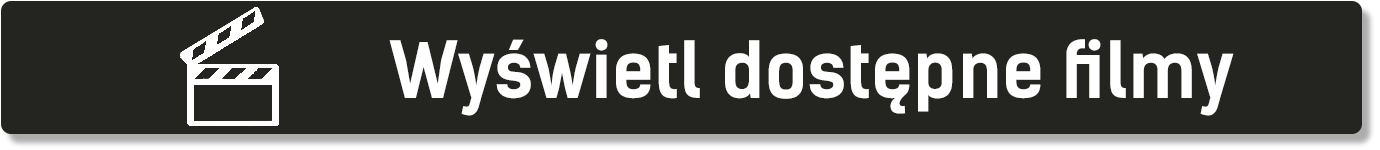
<style>
.page{position:relative;width:1380px;height:150px;background:#242420}
.page>*{position:absolute;margin:0}
.t1{font:75px "KelsonSansBG-Bold";color:#ffffff}
</style>
<div class="page">
<p class="t1" style="left:389px;top:39px;width:845px;height:77px">Wyświetl dostępne filmy</p>
</div>
